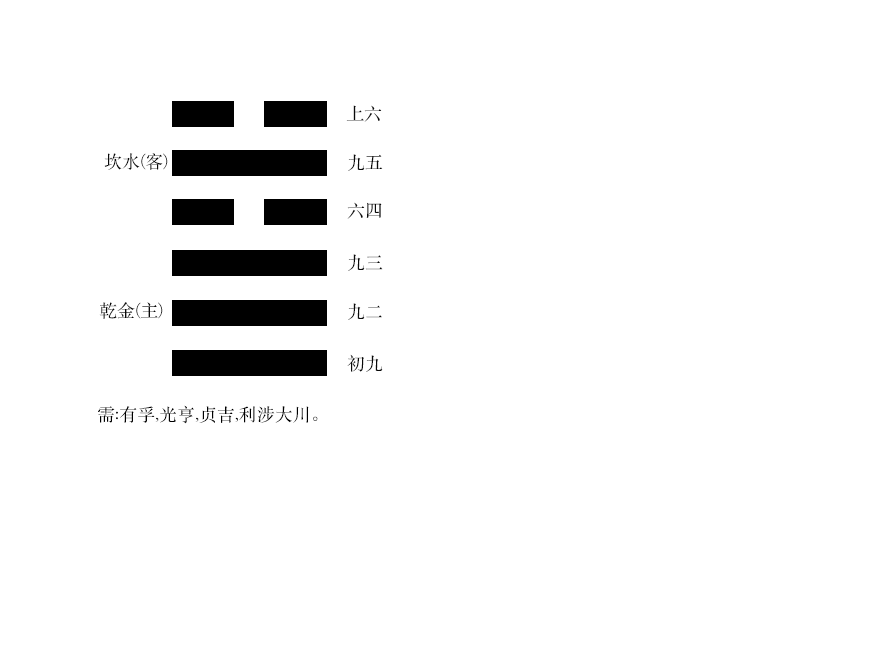
<style>
.page{position:relative;width:896px;height:672px;background:#ffffff}
.page>*{position:absolute;margin:0}
.t1{font:18px "STSongti-SC-Regular";color:#090909}
.t2{font:18px "STSongti-SC-Regular";color:#000000}
</style>
<div class="page">
<p class="t1" style="left:346px;top:105px;width:36px;height:17px">上六</p>
<p class="t1" style="left:104px;top:153px;width:64px;height:17px">坎水(客)</p>
<p class="t1" style="left:348px;top:154px;width:35px;height:17px">九五</p>
<p class="t1" style="left:347px;top:202px;width:35px;height:17px">六四</p>
<p class="t1" style="left:348px;top:254px;width:35px;height:17px">九三</p>
<p class="t1" style="left:99px;top:302px;width:64px;height:17px">乾金(主)</p>
<p class="t1" style="left:348px;top:303px;width:34px;height:17px">九二</p>
<p class="t1" style="left:347px;top:354px;width:36px;height:18px">初九</p>
<p class="t2" style="left:98px;top:405px;width:220px;height:19px">需:有孚,光亨,贞吉,利涉大川。</p>
</div>
